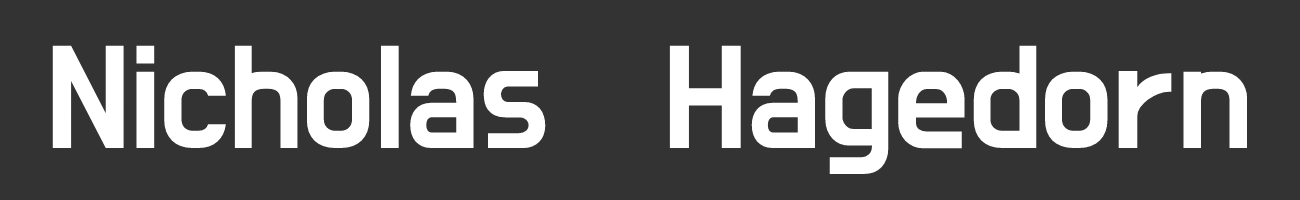
<style>
.page{position:relative;width:1300px;height:200px;background:#333333}
.page>*{position:absolute;margin:0}
.t1{font:150px "DoHyeon-Regular";color:#ffffff}
</style>
<div class="page">
<p class="t1" style="left:52px;top:45px;width:1196px;height:129px">Nicholas Hagedorn</p>
</div>
